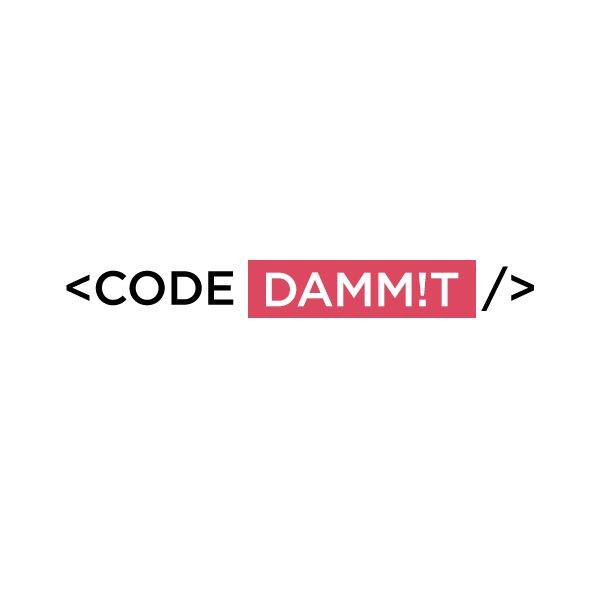
<style>
.page{position:relative;width:600px;height:600px;background:#ffffff}
.page>*{position:absolute;margin:0}
.t1{font:48px "Gotham-Medium";letter-spacing:-0.014em;color:#000000}
.t2{font:48px "Gotham-Medium";letter-spacing:-0.014em;color:#ffffff}
</style>
<div class="page">
<p class="t1" style="left:66px;top:266px;width:468px;height:45px">&lt;CODE                  /&gt;</p>
<p class="t2" style="left:266px;top:272px;width:193px;height:35px">DAMM!T</p>
</div>
